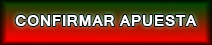
<style>
.page{position:relative;width:212px;height:45px}
.page>*{position:absolute;margin:0}
.t1{font:15.5px "Kartika-Bold";color:#fffefe}
</style>
<div class="page">
<p class="t1" style="left:15px;top:15px;width:182px;height:11px">CONFIRMAR APUESTA</p>
</div>
